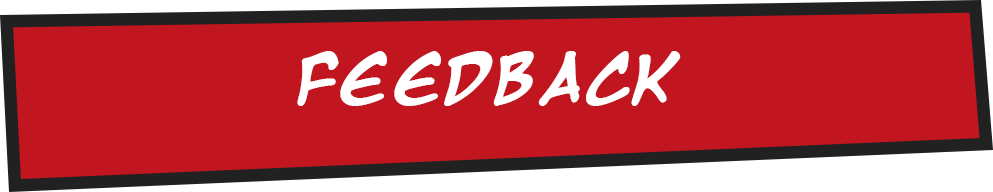
<style>
.page{position:relative;width:993px;height:192px;background:#c11520}
.page>*{position:absolute;margin:0}
.t1{font:57.3px "MangaTempleBold";color:#ffffff}
</style>
<div class="page">
<p class="t1" style="left:297px;top:51px;width:384px;height:55px">Feedback</p>
</div>
